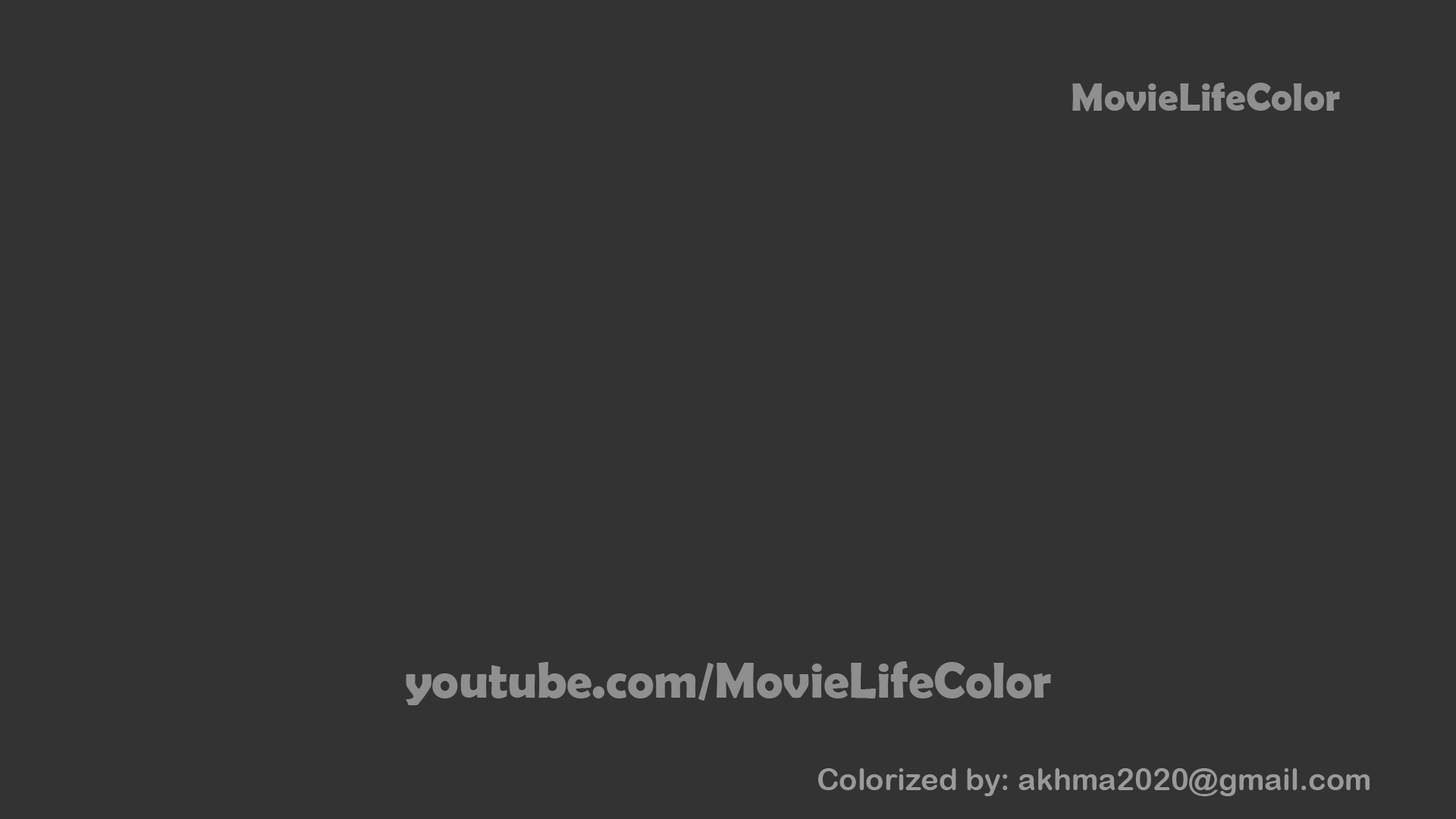
<style>
.page{position:relative;width:1456px;height:819px;background:#333333}
.page>*{position:absolute;margin:0}
.t1{font:40.3px "BerlinSansFBDemi-Bold";color:#8f8f8f}
.t2{font:50.5px "BerlinSansFBDemi-Bold";color:#8f8f8f}
.t3{font:30.3px "ArialRoundedMTBold";color:#9a9a9a}
</style>
<div class="page">
<p class="t1" style="left:1072px;top:83px;width:268px;height:28px">MovieLifeColor</p>
<p class="t2" style="left:406px;top:661px;width:645px;height:44px">youtube.com/MovieLifeColor</p>
<p class="t3" style="left:818px;top:768px;width:552px;height:28px">Colorized by: akhma2020@gmail.com</p>
</div>
